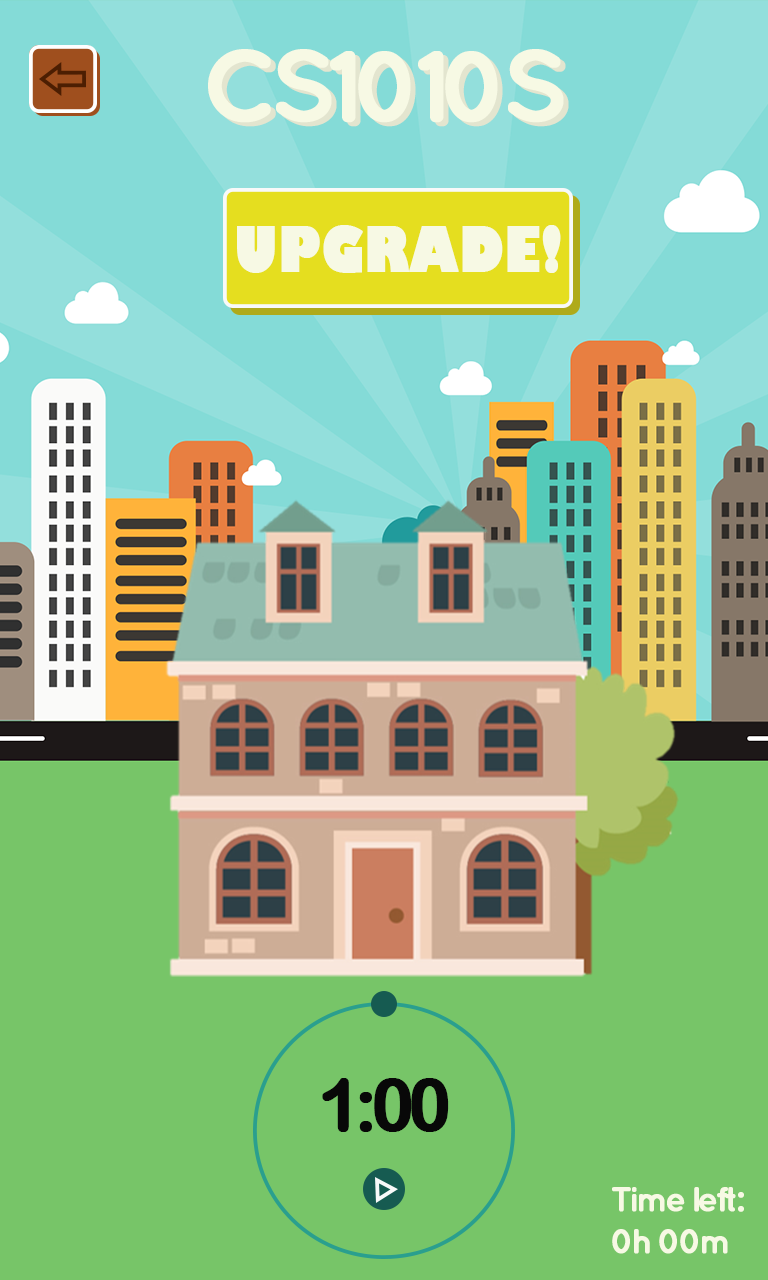
<style>
.page{position:relative;width:768px;height:1280px;background:#77c568}
.page>*{position:absolute;margin:0}
.t1{font:100px "Quicksand-Bold";letter-spacing:-0.1em;color:#f7f9e4;font-weight:bold;scale:0.97 1}
.t2{font:100px "Quicksand-Bold";letter-spacing:-0.1em;color:#e3e5cf;font-weight:bold;scale:0.97 1}
.t3{font:60px "GillSans-UltraBold";color:#f7f9e4;font-weight:bold;scale:0.82 1}
.t4{font:34.5px "Quicksand-Bold";letter-spacing:-0.1em;color:#f7f9e4;font-weight:bold}
</style>
<div class="page">
<p class="t1" style="left:208px;top:49px;width:356px;height:74px">CS1010S</p>
<p class="t2" style="left:213px;top:53px;width:356px;height:74px">CS1010S</p>
<p class="t3" style="left:237px;top:225px;width:324px;height:48px">UPGRADE!</p>
<p class="t4" style="left:612px;top:1187px;width:132px;height:67px">Time left: <br>0h 00m</p>
</div>
